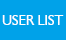
<style>
.page{position:relative;width:66px;height:40px;background:#00a2e9}
.page>*{position:absolute;margin:0}
.t1{font:13.9px "Humanist521BT-Roman";color:#ffffff}
</style>
<div class="page">
<p class="t1" style="left:2px;top:15px;width:62px;height:10px">USER LIST</p>
</div>
